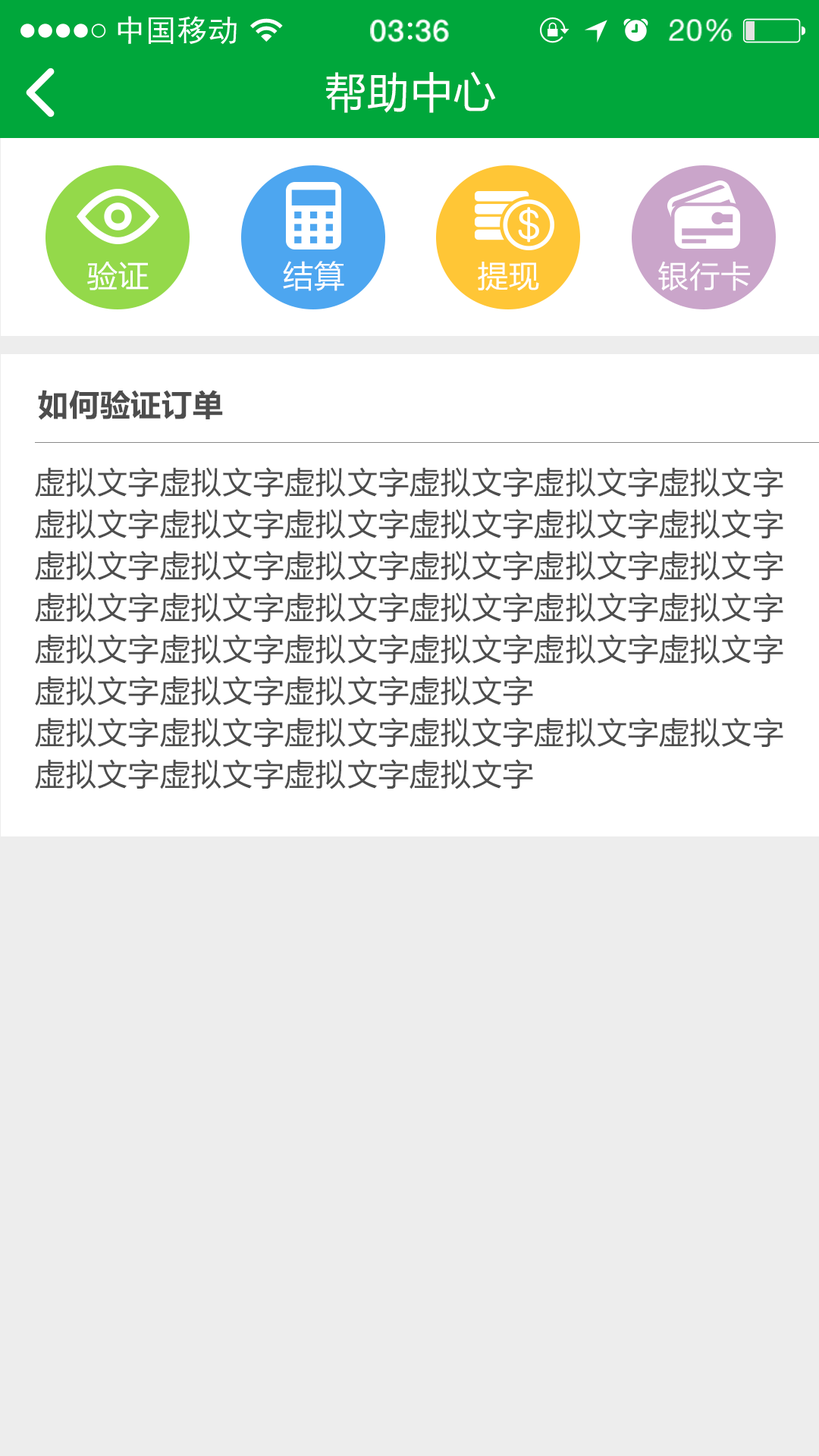
<style>
.page{position:relative;width:819px;height:1456px;background:#ededed}
.page>*{position:absolute;margin:0}
.t1{font:41.7px "MicrosoftYaHei";letter-spacing:0.02em;color:#ffffff}
.t2{font:30.3px "MicrosoftYaHei";letter-spacing:0.02em;color:#ffffff}
.t3{font:30.3px "MicrosoftYaHei-Bold";letter-spacing:0.02em;color:#4d4d4d}
.t4{font:30.3px/41.7px "MicrosoftYaHei";letter-spacing:0.02em;color:#4d4d4d}
</style>
<div class="page">
<p class="t1" style="left:326px;top:71px;width:170px;height:42px">帮助中心</p>
<p class="t2" style="left:87px;top:262px;width:62px;height:28px">验证</p>
<p class="t2" style="left:283px;top:261px;width:61px;height:30px">结算</p>
<p class="t2" style="left:478px;top:262px;width:61px;height:29px">提现</p>
<p class="t2" style="left:658px;top:261px;width:92px;height:30px">银行卡</p>
<p class="t3" style="left:38px;top:390px;width:185px;height:30px">如何验证订单</p>
<p class="t4" style="left:35px;top:467px;width:748px;height:322px">虚拟文字虚拟文字虚拟文字虚拟文字虚拟文字虚拟文字虚拟文字虚拟文字虚拟文字虚拟文字虚拟文字虚拟文字虚拟文字虚拟文字虚拟文字虚拟文字虚拟文字虚拟文字虚拟文字虚拟文字虚拟文字虚拟文字虚拟文字虚拟文字虚拟文字虚拟文字虚拟文字虚拟文字虚拟文字虚拟文字虚拟文字虚拟文字虚拟文字虚拟文字<br>虚拟文字虚拟文字虚拟文字虚拟文字虚拟文字虚拟文字虚拟文字虚拟文字虚拟文字虚拟文字</p>
</div>
